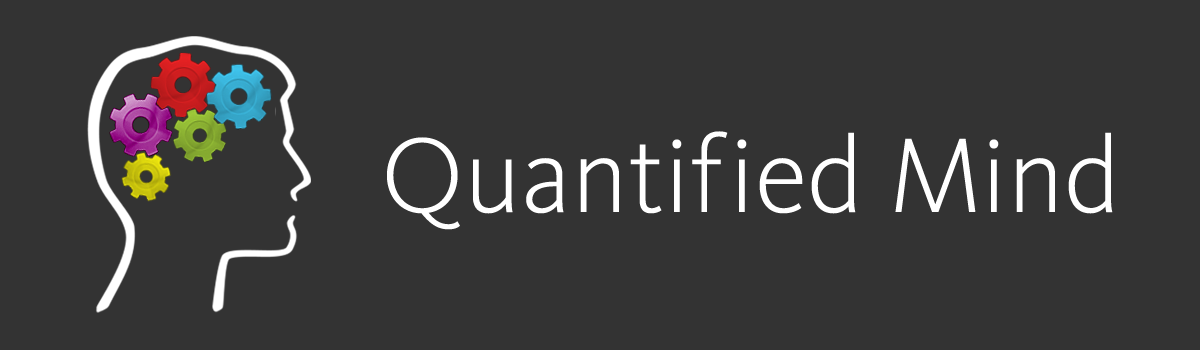
<style>
.page{position:relative;width:1200px;height:350px;background:#333333}
.page>*{position:absolute;margin:0}
.t1{font:110px "KievitOT-Light";color:#ffffff}
</style>
<div class="page">
<p class="t1" style="left:387px;top:131px;width:726px;height:99px">Quantif ied Mind</p>
</div>
